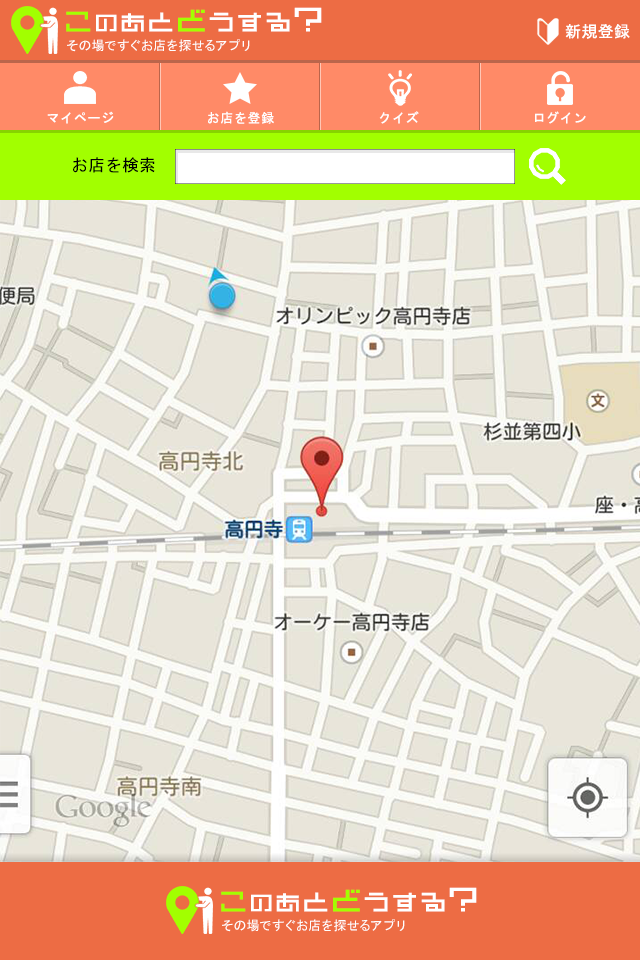
<style>
.page{position:relative;width:640px;height:960px}
.page>*{position:absolute;margin:0}
.t1{font:27.6px "DBstraight12";letter-spacing:0.05em;color:#ffffff;font-weight:bold;scale:0.96 1}
.t2{font:28.8px "DBstraight12";letter-spacing:0.05em;color:#a2ff00;font-weight:bold;scale:0.96 1}
.t3{font:24.5px "DBstraight12";letter-spacing:0.05em;color:#ffffff;font-weight:bold;scale:0.96 1}
.t4{font:26.7px "DBstraight12";letter-spacing:0.05em;color:#ffffff;font-weight:bold;scale:0.96 1}
.t5{font:27.7px "DBstraight12";letter-spacing:0.05em;color:#ffffff;font-weight:bold;scale:0.96 1}
.t6{font:31.9px "DBstraight12";letter-spacing:0.05em;color:#a2ff00;font-weight:bold;scale:0.96 1}
.t7{font:34.9px "DBstraight12";letter-spacing:0.05em;color:#ffffff;font-weight:bold;scale:0.96 1}
.t8{font:16px "MS-Gothic";letter-spacing:0.05em;color:#ffffff}
.t9{font:13px "MS-Gothic";letter-spacing:0.05em;color:#ffffff}
.t10{font:17px "MS-Gothic";color:#000000}
</style>
<div class="page">
<p class="t1" style="left:66px;top:7px;width:256px;height:25px"><span class="t2">こ</span><span class="t3">の</span><span class="t4">あ</span><span class="t5">と</span><span class="t6">ど</span>うする<span class="t7">?</span></p>
<p class="t8" style="left:565px;top:24px;width:65px;height:15px">新規登録</p>
<p class="t9" style="left:67px;top:39px;width:183px;height:13px">その場ですぐお店を探せるアプリ</p>
<p class="t9" style="left:47px;top:111px;width:67px;height:13px">マイページ</p>
<p class="t9" style="left:208px;top:111px;width:66px;height:13px">お店を登録</p>
<p class="t9" style="left:379px;top:111px;width:40px;height:13px">クイズ</p>
<p class="t9" style="left:535px;top:111px;width:51px;height:13px">ログイン</p>
<p class="t10" style="left:73px;top:157px;width:82px;height:16px">お店を検索</p>
<p class="t1" style="left:221px;top:887px;width:256px;height:25px"><span class="t2">こ</span><span class="t3">の</span><span class="t4">あ</span><span class="t5">と</span><span class="t6">ど</span>うする<span class="t7">?</span></p>
<p class="t9" style="left:222px;top:919px;width:183px;height:13px">その場ですぐお店を探せるアプリ</p>
</div>
